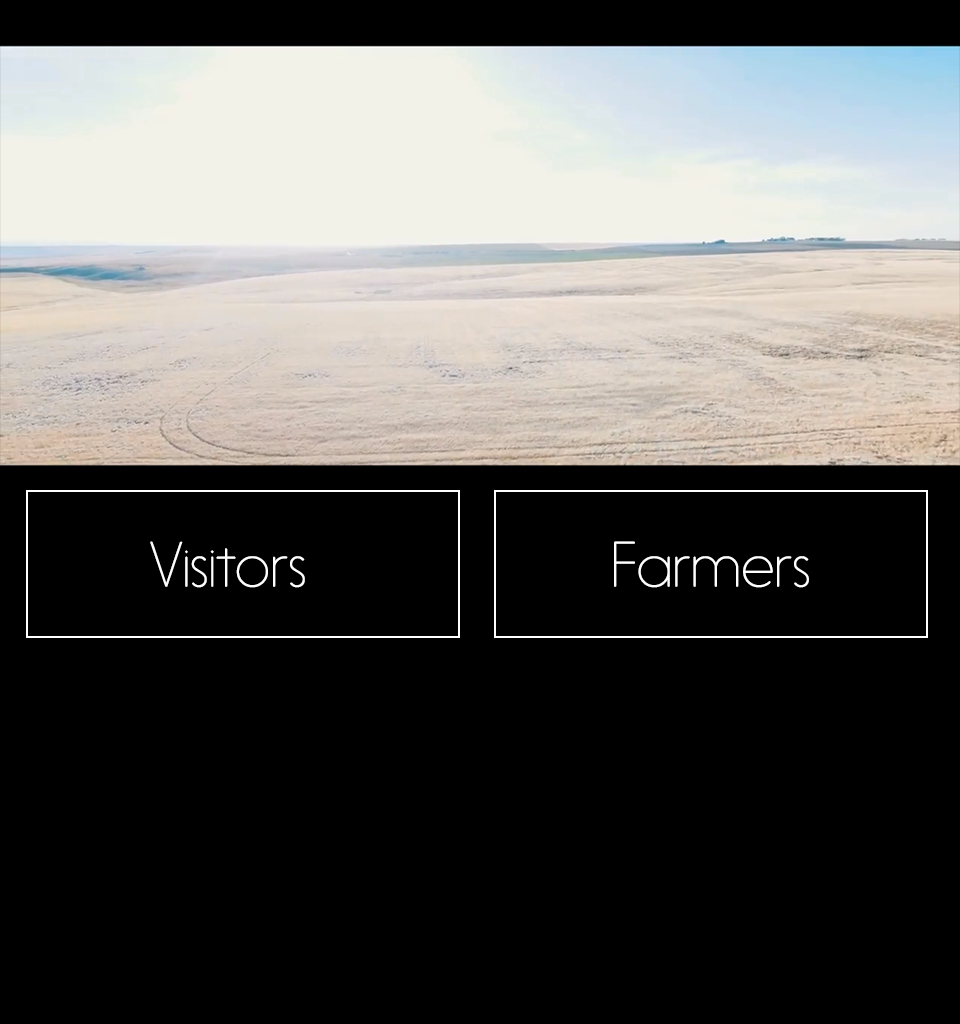
<style>
.page{position:relative;width:960px;height:1024px;background:#000000}
.page>*{position:absolute;margin:0}
.t1{font:60px "Nanami-Rounded-Thin";color:#ffffff}
</style>
<div class="page">
<p class="t1" style="left:150px;top:541px;width:155px;height:47px">Visitors</p>
<p class="t1" style="left:614px;top:541px;width:195px;height:47px">Farmers</p>
</div>
